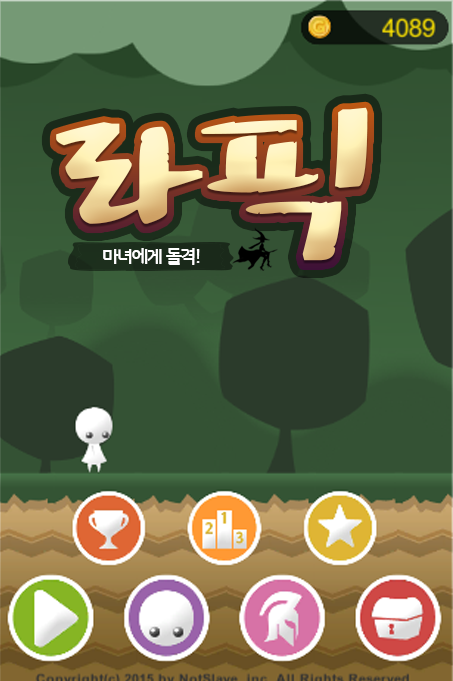
<style>
.page{position:relative;width:453px;height:681px}
.page>*{position:absolute;margin:0}
.t1{font:178.4px "drfont_daraehand";letter-spacing:-0.075em}
.t2{font:18px "GodoM";letter-spacing:-0.075em;color:#ffffff}
</style>
<div class="page">
<p class="t1" style="left:56px;top:107px;width:312px;height:154px">라픽</p>
<p class="t2" style="left:103px;top:248px;width:97px;height:17px">마녀에게 돌격!</p>
</div>
